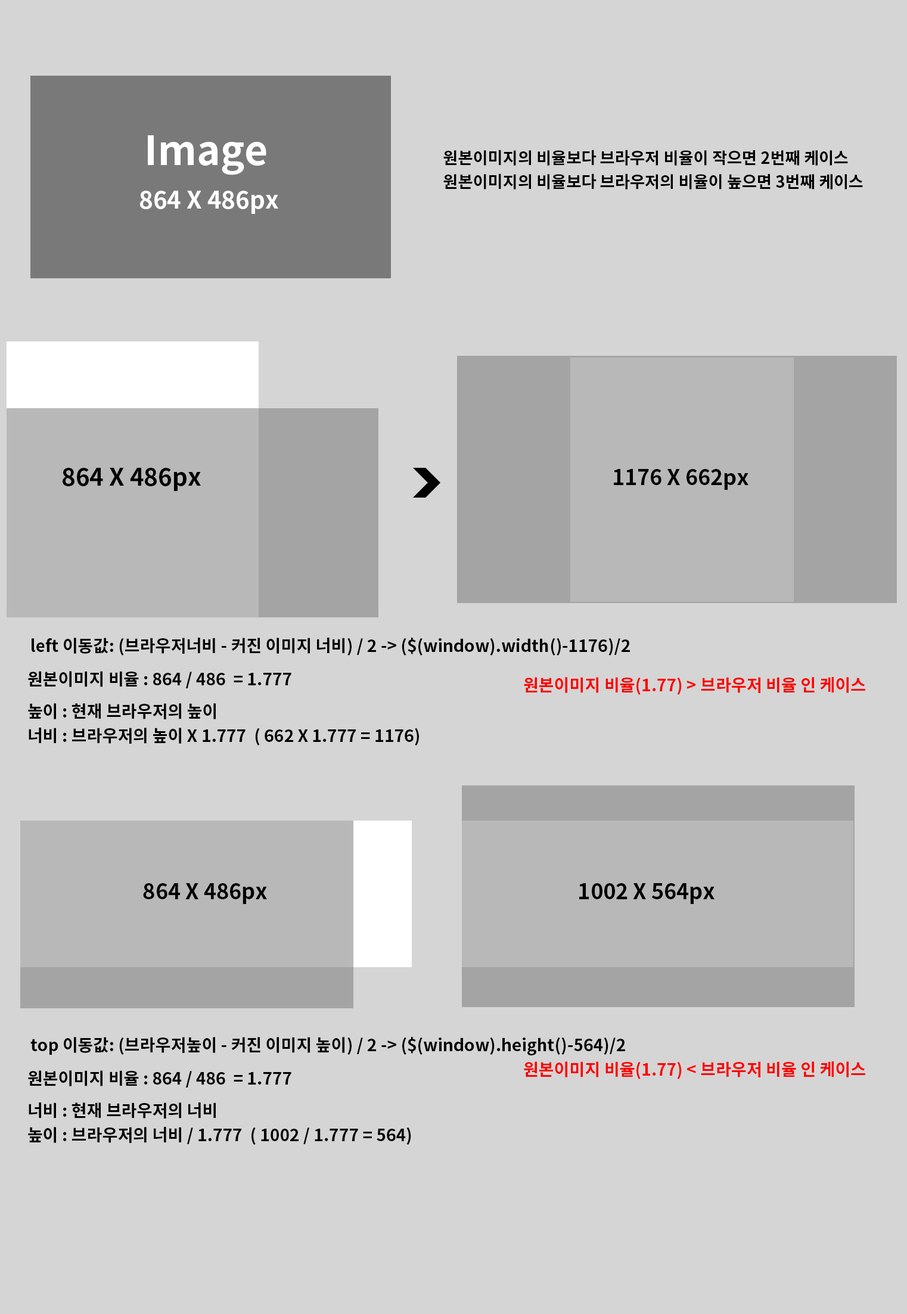
<style>
.page{position:relative;width:907px;height:1314px;background:#d5d5d5}
.page>*{position:absolute;margin:0}
.t1{font:40.4px "NotoSansCJKkr-Bold";color:#ffffff}
.t2{font:16.3px/23.7px "NotoSansCJKkr-Bold";color:#000000}
.t3{font:24px "NotoSansCJKkr-Bold";color:#ffffff}
.t4{font:24px "NotoSansCJKkr-Bold";color:#000000}
.t5{font:21.3px "NotoSansCJKkr-Bold";color:#000000}
.t6{font:16.8px "NotoSansCJKkr-Bold";color:#000000}
.t7{font:16.8px "NotoSansCJKkr-Bold";color:#ff0000}
.t8{font:21.4px "NotoSansCJKkr-Bold";color:#000000}
</style>
<div class="page">
<p class="t1" style="left:148px;top:135px;width:118px;height:40px">Image</p>
<p class="t2" style="left:443px;top:150px;width:420px;height:40px">원본이미지의 비율보다 브라우저 비율이 작으면 2번째 케이스<br>원본이미지의 비율보다 브라우저의 비율이 높으면 3번째 케이스</p>
<p class="t3" style="left:140px;top:191px;width:138px;height:23px">864 X 486px</p>
<p class="t4" style="left:63px;top:468px;width:138px;height:23px">864 X 486px</p>
<p class="t5" style="left:614px;top:469px;width:135px;height:21px">1176 X 662px</p>
<p class="t6" style="left:32px;top:638px;width:598px;height:18px">left 이동값: (브라우저너비 - 커진 이미지 너비) / 2 -&gt; ($(window).width()-1176)/2</p>
<p class="t6" style="left:28px;top:671px;width:263px;height:17px">원본이미지 비율 : 864 / 486  = 1.777</p>
<p class="t7" style="left:524px;top:677px;width:342px;height:18px">원본이미지 비율(1.77) &gt; 브라우저 비율 인 케이스</p>
<p class="t6" style="left:28px;top:703px;width:188px;height:16px">높이 : 현재 브라우저의 높이</p>
<p class="t6" style="left:29px;top:728px;width:390px;height:18px">너비 : 브라우저의 높이 X 1.777  ( 662 X 1.777 = 1176)</p>
<p class="t8" style="left:143px;top:883px;width:124px;height:21px">864 X 486px</p>
<p class="t8" style="left:579px;top:883px;width:136px;height:21px">1002 X 564px</p>
<p class="t6" style="left:30px;top:1037px;width:595px;height:19px">top 이동값: (브라우저높이 - 커진 이미지 높이) / 2 -&gt; ($(window).height()-564)/2</p>
<p class="t7" style="left:524px;top:1062px;width:342px;height:18px">원본이미지 비율(1.77) &lt; 브라우저 비율 인 케이스</p>
<p class="t6" style="left:28px;top:1071px;width:263px;height:17px">원본이미지 비율 : 864 / 486  = 1.777</p>
<p class="t6" style="left:29px;top:1103px;width:187px;height:16px">너비 : 현재 브라우저의 너비</p>
<p class="t6" style="left:28px;top:1127px;width:383px;height:18px">높이 : 브라우저의 너비 / 1.777  ( 1002 / 1.777 = 564)</p>
</div>
